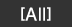
<style>
.page{position:relative;width:72px;height:27px;background:#333333}
.page>*{position:absolute;margin:0}
.t1{font:18px "FutoGoB101Pr5-Bold";color:#ffffff}
.t2{font:14.9px "FutoGoB101Pr5-Bold";color:#ffffff;scale:1.2 1}
</style>
<div class="page">
<p class="t1" style="left:21px;top:7px;width:30px;height:14px"><span class="t2">[</span>All<span class="t2">]</span></p>
</div>
